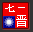
<style>
.page{position:relative;width:33px;height:32px;background:#f20000}
.page>*{position:absolute;margin:0}
.t1{font:10.4px "SimSun";color:#ffffff}
.t2{font:11.7px "SimSun";color:#ffffff}
</style>
<div class="page">
<p class="t1" style="left:5px;top:4px;width:20px;height:8px">七一</p>
<p class="t2" style="left:16px;top:15px;width:11px;height:12px">晋</p>
</div>
